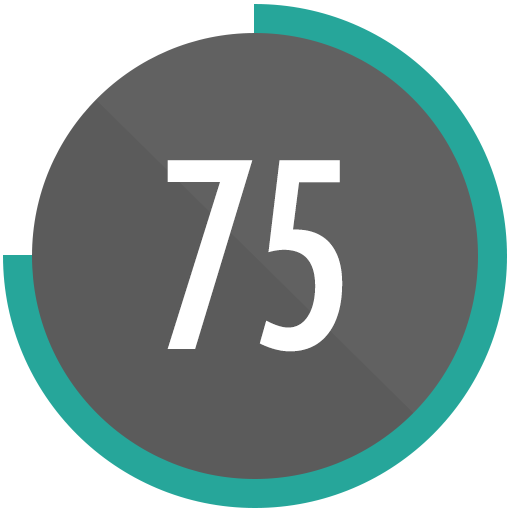
<style>
.page{position:relative;width:512px;height:512px;background:#ffffff}
.page>*{position:absolute;margin:0}
.t1{font:250px "Futura-CondensedMedium";letter-spacing:-0.04em;color:#ffffff}
</style>
<div class="page">
<p class="t1" style="left:167px;top:160px;width:176px;height:192px">75</p>
</div>
